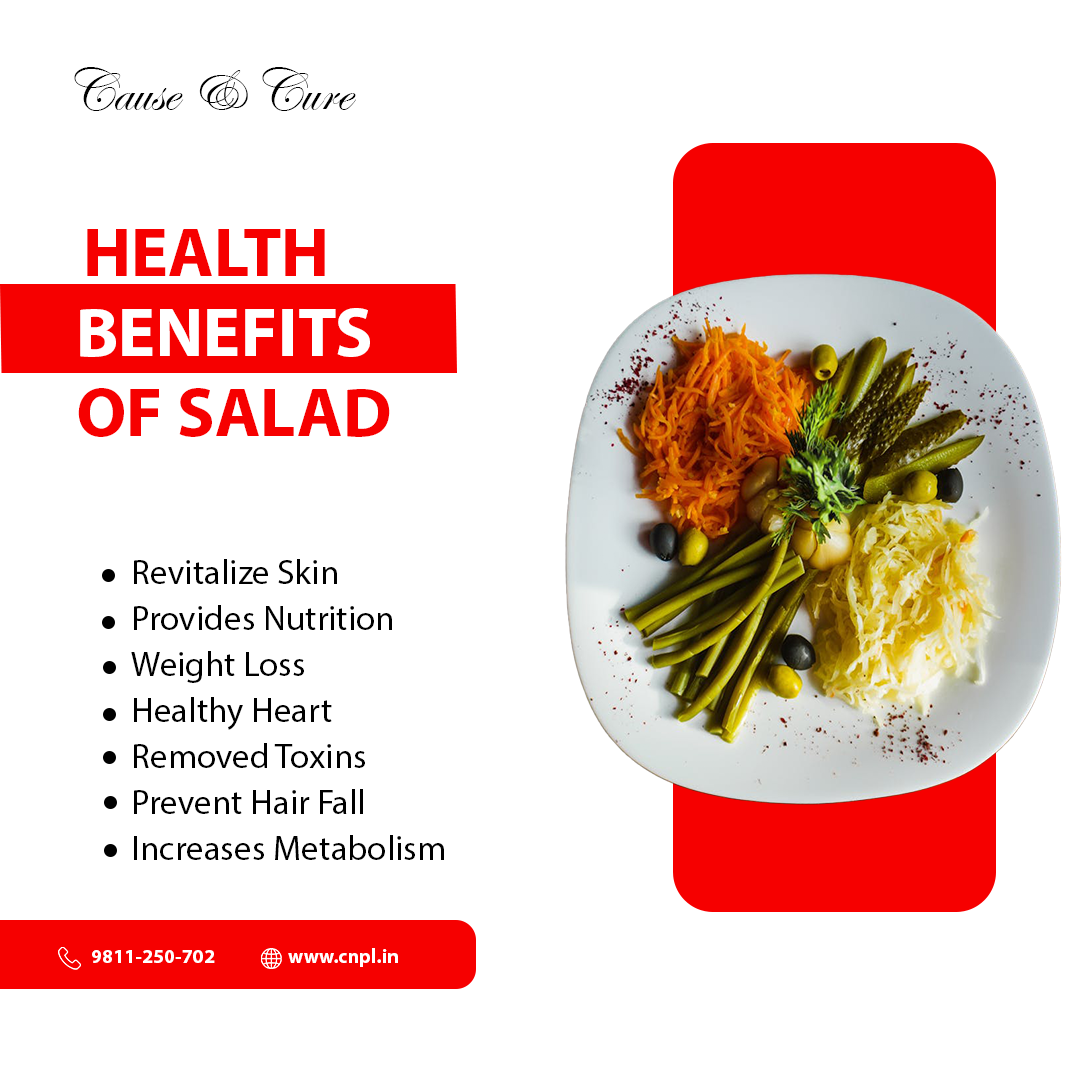
<style>
.page{position:relative;width:1080px;height:1080px;background:#ffffff}
.page>*{position:absolute;margin:0}
.t1{font:60px "EdwardianScriptITC";color:#010101}
.t2{font:70px "MyriadPro-Bold";color:#f60000}
.t3{font:70px "MyriadPro-Bold";color:#ffffff}
.t4{font:35px/46px "MyriadPro-Regular";color:#000000}
.t5{font:20px "MyriadPro-Bold";color:#ffffff}
</style>
<div class="page">
<p class="t1" style="left:74px;top:67px;width:282px;height:44px">Cause &amp; Cure</p>
<p class="t2" style="left:87px;top:229px;width:238px;height:47px">HEALTH</p>
<p class="t3" style="left:80px;top:308px;width:290px;height:49px">BENEFITS</p>
<p class="t2" style="left:78px;top:388px;width:312px;height:49px">OF SALAD</p>
<p class="t4" style="left:131px;top:559px;width:313px;height:301px">Revitalize Skin<br>Provides Nutrition<br>Weight Loss<br>Healthy Heart<br>Removed Toxins<br>Prevent Hair Fall<br>Increases Metabolism</p>
<p class="t5" style="left:92px;top:950px;width:123px;height:13px">9811-250-702</p>
<p class="t5" style="left:288px;top:948px;width:110px;height:19px">www.cnpl.in</p>
</div>
